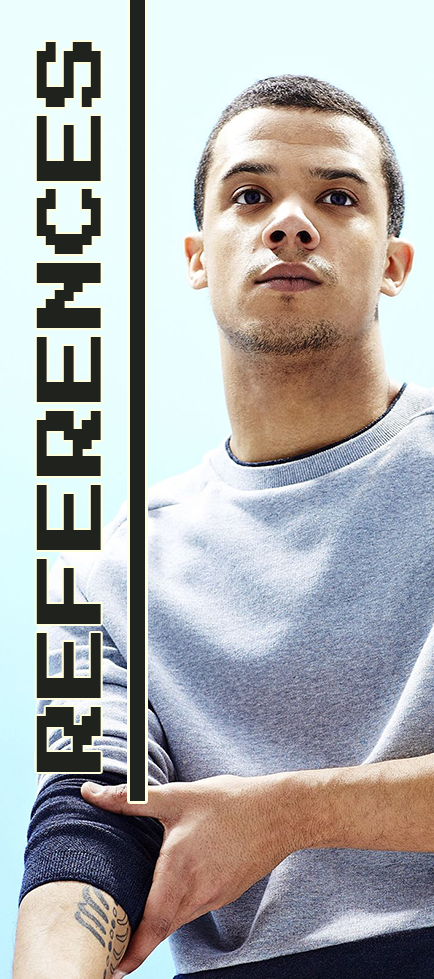
<style>
.page{position:relative;width:434px;height:979px}
.page>*{position:absolute;margin:0}
.t1{font:72px "PressStart2P-Regular";color:#20221e;font-weight:bold}
</style>
<div class="page">
<p class="t1" style="left:36px;top:42px;width:65px;height:730px;rotate:-90deg">REFERENCES</p>
</div>
